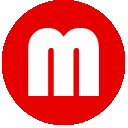
<style>
.page{position:relative;width:128px;height:128px;background:#ffffff}
.page>*{position:absolute;margin:0}
.t1{font:100px "Bauhaus93";letter-spacing:0.025em;color:#ffffff}
</style>
<div class="page">
<p class="t1" style="left:28px;top:28px;width:71px;height:68px">M</p>
</div>
